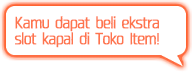
<style>
.page{position:relative;width:192px;height:73px;background:#ffffff}
.page>*{position:absolute;margin:0}
.t1{font:15px/16px "04KanjyukuGothic";letter-spacing:-0.08em;color:#fe754e;font-weight:bold;scale:0.9 1}
</style>
<div class="page">
<p class="t1" style="left:14px;top:16px;width:145px;height:32px">Kamu dapat beli ekstra <br>slot kapal di Toko Item!</p>
</div>
